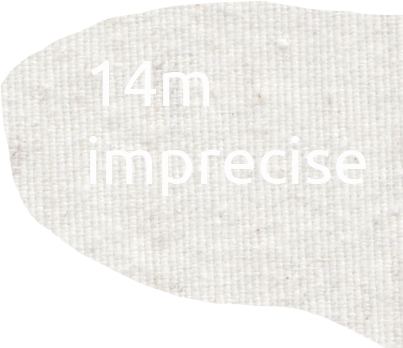
<style>
.page{position:relative;width:403px;height:348px;background:#ffffff}
.page>*{position:absolute;margin:0}
.t1{font:65px "Ubuntu";color:#fdfdfd}
</style>
<div class="page">
<p class="t1" style="left:89px;top:61px;width:277px;height:135px">14m<br>imprecise</p>
</div>
